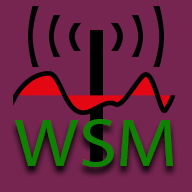
<style>
.page{position:relative;width:192px;height:192px;background:#762551}
.page>*{position:absolute;margin:0}
.t1{font:68.9px "MyriadPro-Regular";color:#108201;scale:1.11 1}
</style>
<div class="page">
<p class="t1" style="left:15px;top:119px;width:158px;height:48px">WSM</p>
</div>
